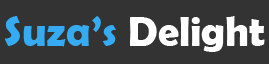
<style>
.page{position:relative;width:269px;height:64px;background:#333333}
.page>*{position:absolute;margin:0}
.t1{font:42px "BerlinSansFBDemi-Bold";color:#ffffff}
.t2{font:42px "BerlinSansFBDemi-Bold";color:#35abf3}
</style>
<div class="page">
<p class="t1" style="left:5px;top:16px;width:260px;height:36px"><span class="t2">Suza’s </span>Delight</p>
</div>
